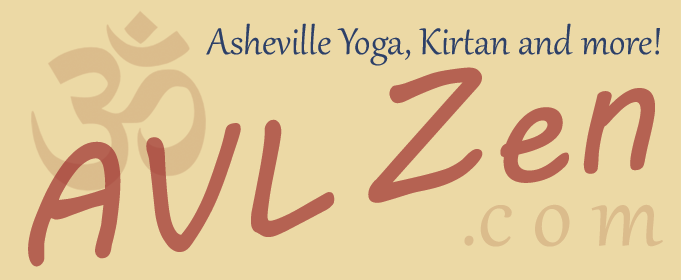
<style>
.page{position:relative;width:681px;height:280px;background:#ecd9a5}
.page>*{position:absolute;margin:0}
.t1{font:45.7px "Gabriola";color:#2d4068}
.t2{font:163.8px "MVBoli";color:#b56252}
.t3{font:113.4px "Gabriola";color:#dbbc8c}
</style>
<div class="page">
<p class="t1" style="left:206px;top:23px;width:454px;height:43px">Asheville Yoga, Kirtan and more!</p>
<p class="t2" style="left:368px;top:67px;width:287px;height:136px;rotate:-7deg">Zen</p>
<p class="t2" style="left:28px;top:119px;width:307px;height:148px;rotate:-7deg">AVL</p>
<p class="t3" style="left:464px;top:204px;width:199px;height:43px">.c o m</p>
</div>
